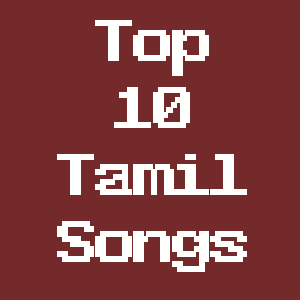
<style>
.page{position:relative;width:300px;height:300px;background:#742a2a}
.page>*{position:absolute;margin:0}
.t1{font:56.1px "WST_Fren";color:#fffffd;font-weight:bold;scale:0.87 1}
</style>
<div class="page">
<p class="t1" style="left:57px;top:20px;width:190px;height:252px;text-align:center">Top<br>10<br>Tamil<br>Songs</p>
</div>
